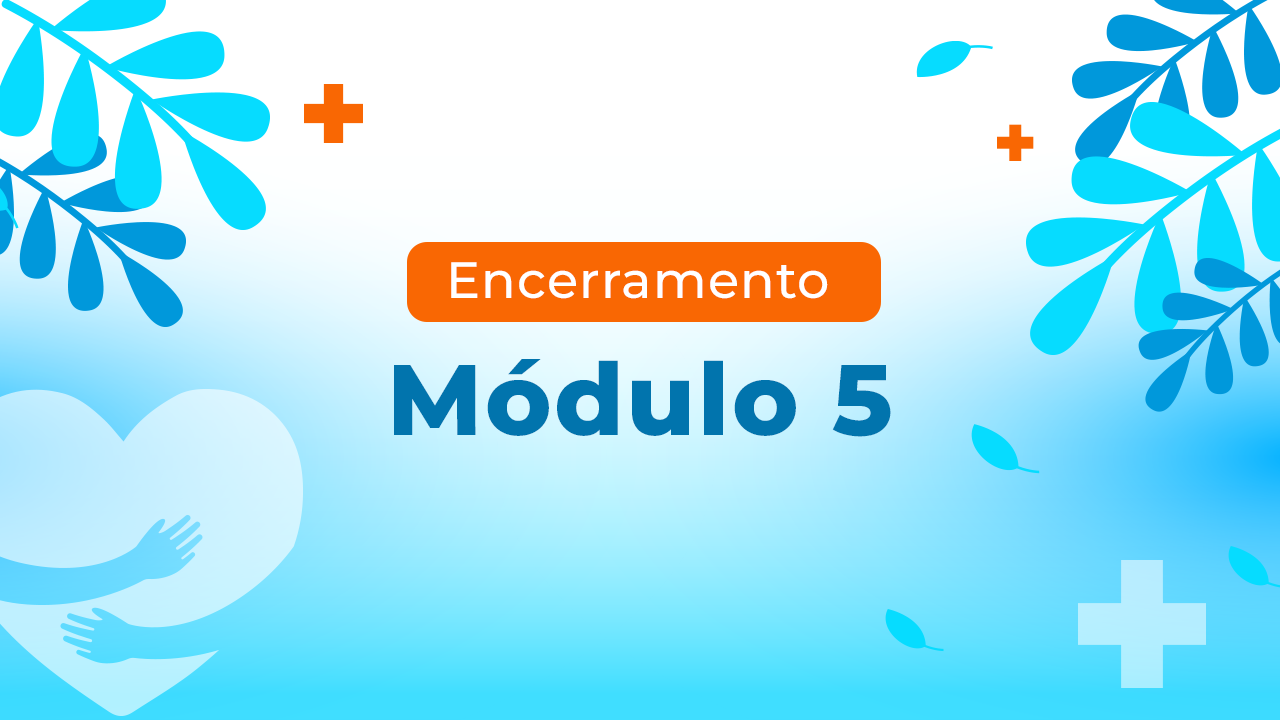
<style>
.page{position:relative;width:1280px;height:720px}
.page>*{position:absolute;margin:0}
.t1{font:51px "Montserrat-Medium";letter-spacing:0.025em;color:#ffffff}
.t2{font:100px "Montserrat-ExtraBold";letter-spacing:0.025em;color:#0174ad}
</style>
<div class="page">
<p class="t1" style="left:451px;top:262px;width:377px;height:37px">Encerramento</p>
<p class="t2" style="left:394px;top:359px;width:497px;height:78px">Módulo 5</p>
</div>
